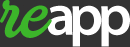
<style>
.page{position:relative;width:130px;height:47px;background:#333333}
.page>*{position:absolute;margin:0}
.t1{font:82.8px "BrandPro";letter-spacing:-0.045em;color:#3cb52b;font-weight:bold}
.t2{font:82.8px "BrandPro";letter-spacing:-0.07em;color:#3cb52b;font-weight:bold}
.t3{font:58.9px "MyriadPro-Semibold";letter-spacing:-0.115em;color:#ffffff}
.t4{font:58.9px "MyriadPro-Semibold";letter-spacing:-0.095em;color:#ffffff}
.t5{font:58.9px "MyriadPro-Semibold";letter-spacing:-0.085em;color:#ffffff}
</style>
<div class="page">
<p class="t1" style="left:0px;top:0px;width:52px;height:38px">r<span class="t2">e</span></p>
<p class="t3" style="left:47px;top:5px;width:83px;height:42px">a<span class="t4">p</span><span class="t5">p</span></p>
</div>
